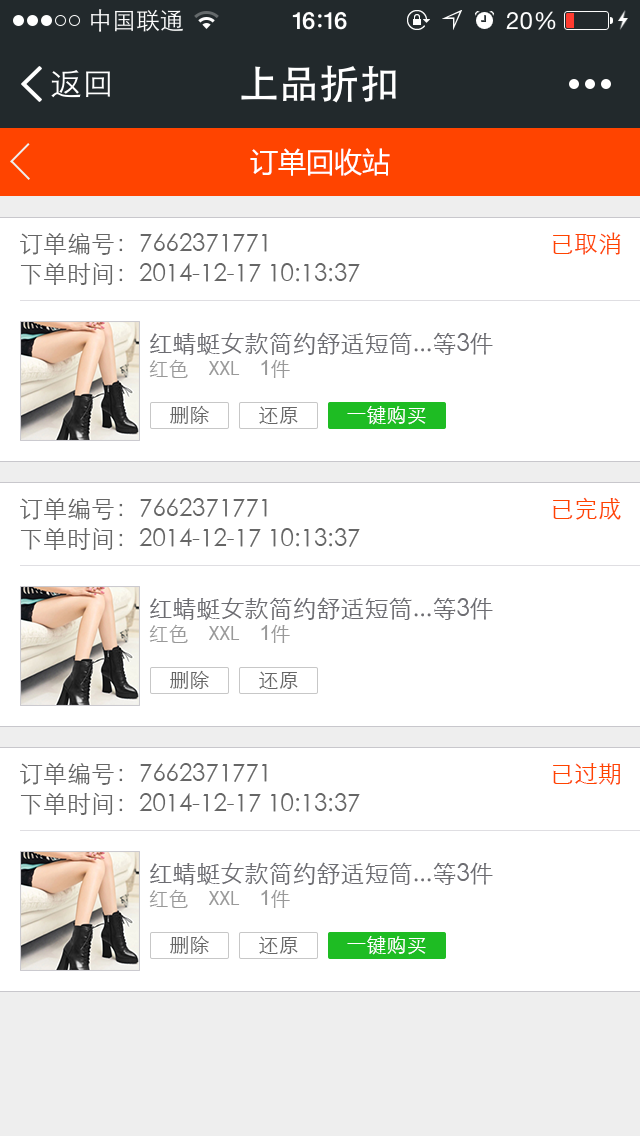
<style>
.page{position:relative;width:640px;height:1136px;background:#ffffff}
.page>*{position:absolute;margin:0}
.t1{font:28px "MicrosoftYaHei";color:#ffffff}
.t2{font:24px/30px "STXihei";color:#666666}
.t3{font:24px "STXihei";color:#ff4400}
.t4{font:24px/24px "STXihei";color:#6d6d72}
.t5{font:20px/24px "STXihei";color:#999999}
.t6{font:20px/24px "Helvetica-Narrow";color:#999999}
.t7{font:20px/24px "ArialMT";color:#999999}
.t8{font:20px "STXihei";color:#666666}
.t9{font:20px "STXihei";color:#ffffff}
</style>
<div class="page">
<p class="t1" style="left:250px;top:148px;width:140px;height:28px">订单回收站</p>
<p class="t2" style="left:20px;top:233px;width:340px;height:52px">订单编号：7662371771<br>下单时间：2014-12-17 10:13:37</p>
<p class="t3" style="left:553px;top:232px;width:68px;height:23px">已取消</p>
<p class="t4" style="left:149px;top:332px;width:344px;height:46px">红蜻蜓女款简约舒适短筒...等3件<br><span class="t5">红色　</span><span class="t6">XXL　</span><span class="t7">1</span><span class="t5">件</span></p>
<p class="t8" style="left:170px;top:405px;width:39px;height:19px">删除</p>
<p class="t8" style="left:259px;top:406px;width:39px;height:18px">还原</p>
<p class="t9" style="left:347px;top:406px;width:79px;height:19px">一键购买</p>
<p class="t3" style="left:553px;top:497px;width:68px;height:23px">已完成</p>
<p class="t2" style="left:20px;top:498px;width:340px;height:52px">订单编号：7662371771<br>下单时间：2014-12-17 10:13:37</p>
<p class="t4" style="left:149px;top:597px;width:344px;height:46px">红蜻蜓女款简约舒适短筒...等3件<br><span class="t5">红色　</span><span class="t6">XXL　</span><span class="t7">1</span><span class="t5">件</span></p>
<p class="t8" style="left:170px;top:670px;width:39px;height:19px">删除</p>
<p class="t8" style="left:259px;top:671px;width:39px;height:18px">还原</p>
<p class="t2" style="left:20px;top:763px;width:340px;height:52px">订单编号：7662371771<br>下单时间：2014-12-17 10:13:37</p>
<p class="t3" style="left:553px;top:763px;width:67px;height:22px">已过期</p>
<p class="t4" style="left:149px;top:862px;width:344px;height:46px">红蜻蜓女款简约舒适短筒...等3件<br><span class="t5">红色　</span><span class="t6">XXL　</span><span class="t7">1</span><span class="t5">件</span></p>
<p class="t8" style="left:170px;top:935px;width:39px;height:19px">删除</p>
<p class="t8" style="left:259px;top:936px;width:39px;height:18px">还原</p>
<p class="t9" style="left:347px;top:936px;width:79px;height:19px">一键购买</p>
</div>
